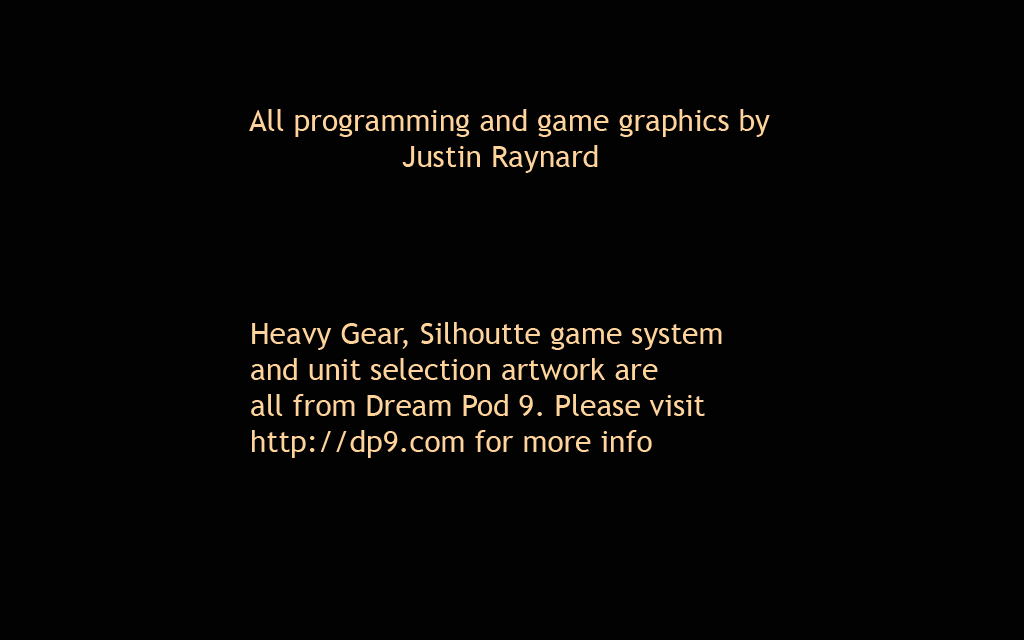
<style>
.page{position:relative;width:1024px;height:640px;background:#020202}
.page>*{position:absolute;margin:0}
.t1{font:30px "TrebuchetMS";color:#ffd49c}
</style>
<div class="page">
<p class="t1" style="left:249px;top:109px;width:521px;height:64px">All programming and game graphics by<br>     Justin Raynard</p>
<p class="t1" style="left:251px;top:322px;width:471px;height:136px">Heavy Gear, Silhoutte game system<br>and unit selection artwork are<br>all from Dream Pod 9. Please visit <br>http://dp9.com for more info</p>
</div>
